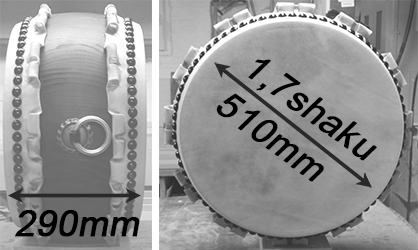
<style>
.page{position:relative;width:418px;height:250px}
.page>*{position:absolute;margin:0}
.t1{font:36px/47px "ArialMT";color:#000000;font-weight:bold;font-style:italic}
.t2{font:36px "ArialMT";color:#000000;font-weight:bold;font-style:italic}
</style>
<div class="page">
<p class="t1" style="left:216px;top:59px;width:161px;height:123px;rotate:36deg">1,7shaku<br>510mm</p>
<p class="t2" style="left:15px;top:210px;width:125px;height:27px">290mm</p>
</div>
